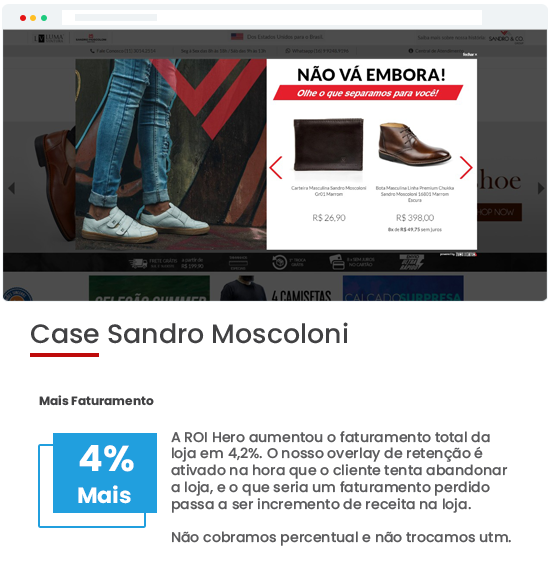
<style>
.page{position:relative;width:552px;height:572px;background:#ffffff}
.page>*{position:absolute;margin:0}
.t1{font:26.6px "Poppins-Medium";color:#414143}
.t2{font:12px "Poppins-Bold";color:#414143}
.t3{font:14px "Poppins-Medium";color:#5b5b5d}
.t4{font:36px "Poppins-Bold";color:#ffffff}
.t5{font:21.9px "Poppins-Bold";color:#ffffff}
</style>
<div class="page">
<p class="t1" style="left:31px;top:322px;width:317px;height:22px">Case Sandro Moscoloni</p>
<p class="t2" style="left:39px;top:395px;width:115px;height:11px">Mais Faturamento</p>
<p class="t3" style="left:171px;top:431px;width:340px;height:115px">A ROI Hero aumentou o faturamento total da<br>loja em 4,2%. O nosso overlay de retenção é<br>ativado na hora que o cliente tenta abandonar<br>a loja, e o que seria um faturamento perdido<br>passa a ser incremento de receita na loja.<br><br>Não cobramos percentual e não trocamos utm.</p>
<p class="t4" style="left:79px;top:445px;width:55px;height:27px">4%</p>
<p class="t5" style="left:78px;top:485px;width:53px;height:19px">Mais</p>
</div>
